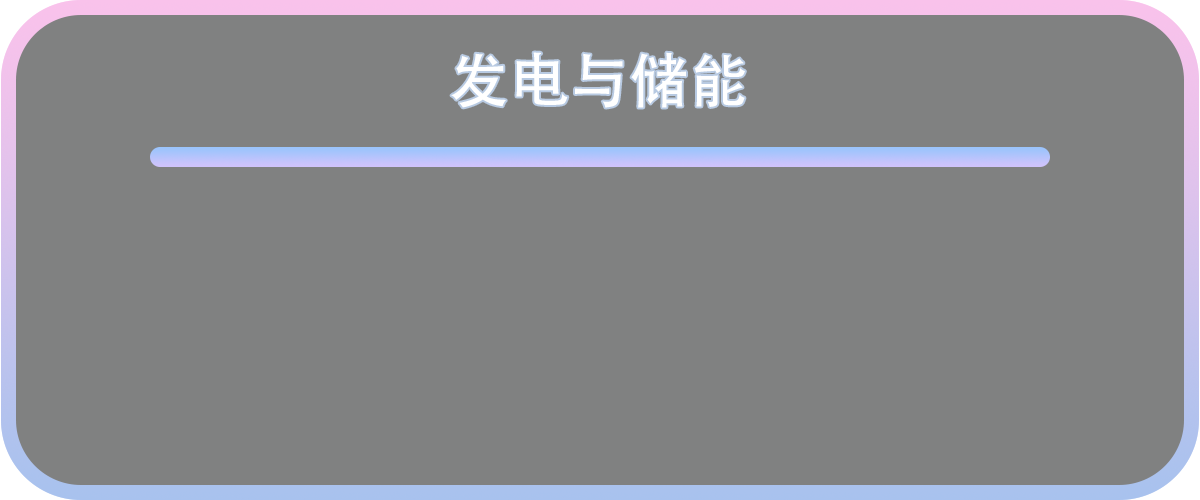
<style>
.page{position:relative;width:1200px;height:500px;background:#808181}
.page>*{position:absolute;margin:0}
.t1{font:60px "AdobeHeitiStd-Regular";color:#ffffff}
</style>
<div class="page">
<p class="t1" style="left:451px;top:52px;width:294px;height:56px">发电与储能</p>
</div>
